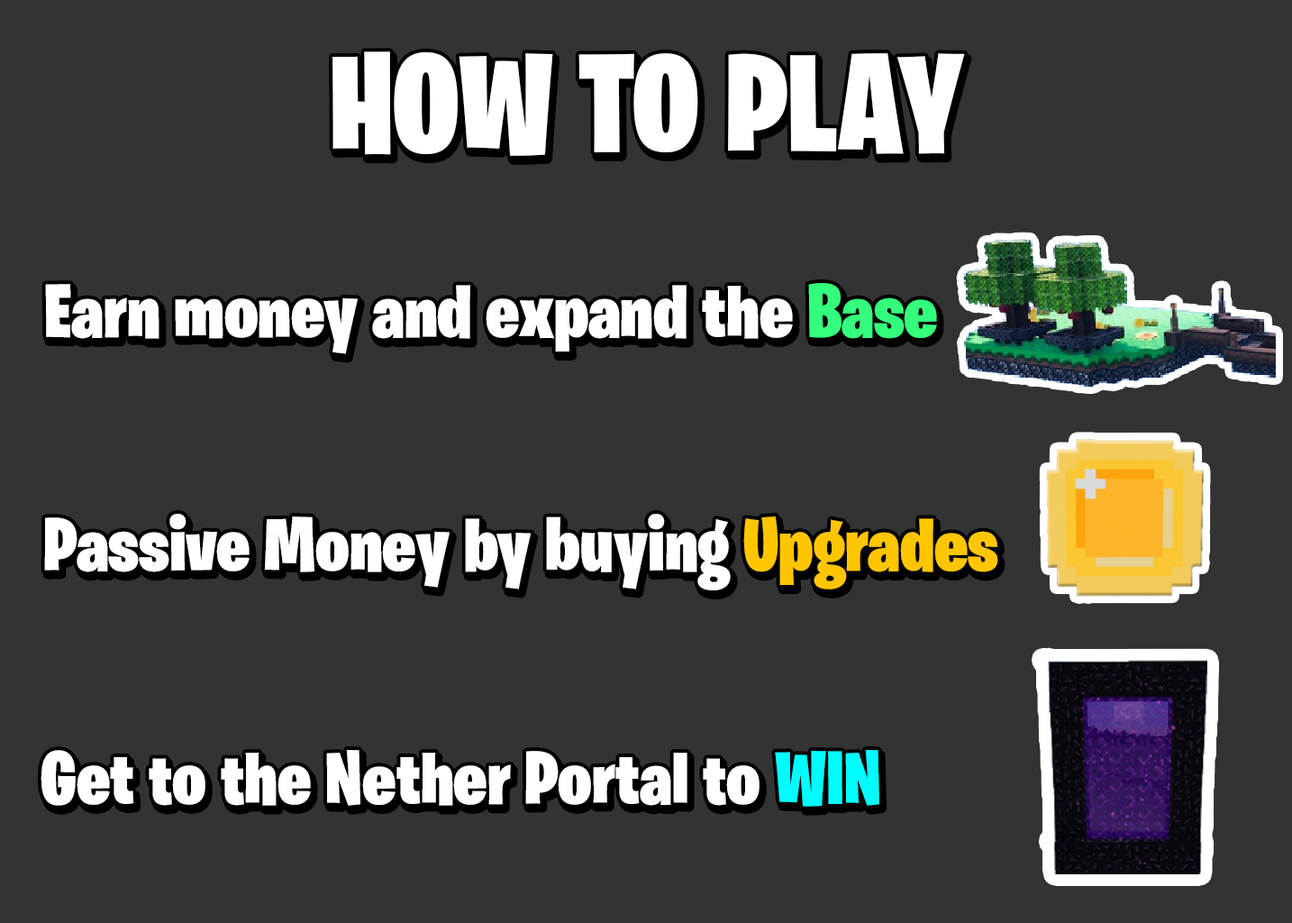
<style>
.page{position:relative;width:1292px;height:923px;background:#333333}
.page>*{position:absolute;margin:0}
.t1{font:139.6px "BurbankBigCondensed-Black";color:#ffffff}
.t2{font:75.8px "BurbankBigCondensed-Black";color:#ffffff}
.t3{font:75.8px "BurbankBigCondensed-Black";color:#34ff7c}
.t4{font:75.8px "BurbankBigCondensed-Black";color:#ffc600}
.t5{font:75.8px "BurbankBigCondensed-Black";color:#00fcff}
</style>
<div class="page">
<p class="t1" style="left:333px;top:51px;width:632px;height:105px">HOW TO PLAY</p>
<p class="t2" style="left:45px;top:283px;width:892px;height:71px">Earn money and expand the <span class="t3">Base</span></p>
<p class="t2" style="left:44px;top:514px;width:954px;height:76px">Passive Money by buying <span class="t4">Upgrades</span></p>
<p class="t2" style="left:41px;top:750px;width:839px;height:57px">Get to the Nether Portal to <span class="t5">WIN</span></p>
</div>
